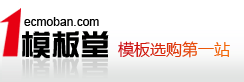
<style>
.page{position:relative;width:244px;height:82px;background:#ffffff}
.page>*{position:absolute;margin:0}
.t1{font:12px "ArialMT";color:#000000}
.t2{font:29.5px "FZZYJW--GB1-0";color:#000000}
.t3{font:16px "MicrosoftYaHei"}
</style>
<div class="page">
<p class="t1" style="left:24px;top:17px;width:75px;height:9px">ecmoban.com</p>
<p class="t2" style="left:22px;top:31px;width:87px;height:27px">模板堂</p>
<p class="t3" style="left:118px;top:41px;width:112px;height:17px">模板选购第一站</p>
</div>
